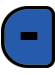
<style>
.page{position:relative;width:55px;height:75px;background:#265bab}
.page>*{position:absolute;margin:0}
.t1{font:62.5px "Arial-BoldMT";color:#000000}
</style>
<div class="page">
<p class="t1" style="left:20px;top:32px;width:18px;height:8px">-</p>
</div>
